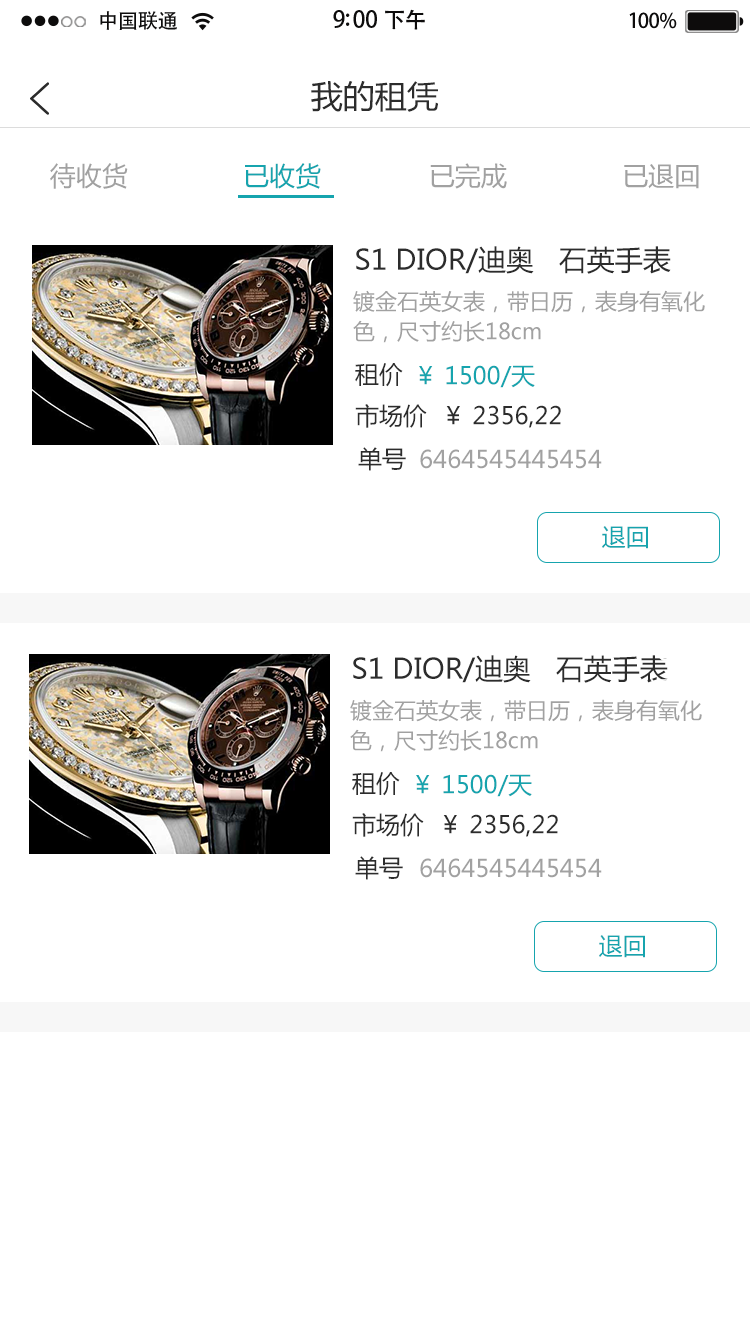
<style>
.page{position:relative;width:750px;height:1334px;background:#ffffff}
.page>*{position:absolute;margin:0}
.t1{font:20.4px "AdobeHeitiStd-Regular";letter-spacing:-0.02em;color:#000000}
.t2{font:23px "AdobeHeitiStd-Regular";letter-spacing:-0.02em;color:#000000}
.t3{font:22px "AdobeHeitiStd-Regular";letter-spacing:-0.02em;color:#000000}
.t4{font:20.4px "AdobeHeitiStd-Regular";letter-spacing:-0.02em;color:#010101}
.t5{font:32px "MicrosoftYaHei";color:#2c2c2c}
.t6{font:26px "MicrosoftYaHei";color:#a1a1a1}
.t7{font:26px "MicrosoftYaHei";color:#2c2c2c}
.t8{font:26px "MicrosoftYaHei";color:#16a4ae}
.t9{font:28px "MicrosoftYaHei";color:#2c2c2c}
.t10{font:22px/15px "MicrosoftYaHei";color:#a1a1a1}
.t11{font:24px "MicrosoftYaHei";color:#2c2c2c}
.t12{font:24px "MicrosoftYaHei";color:#16a4ae}
.t13{font:24px "MicrosoftYaHei";color:#a1a1a1}
</style>
<div class="page">
<p class="t1" style="left:100px;top:11px;width:77px;height:19px">中国联通</p>
<p class="t2" style="left:333px;top:9px;width:92px;height:21px">9:00 <span class="t3">下午</span></p>
<p class="t4" style="left:629px;top:12px;width:48px;height:17px">100%</p>
<p class="t5" style="left:311px;top:81px;width:127px;height:31px">我的租凭</p>
<p class="t6" style="left:50px;top:163px;width:649px;height:26px"><span class="t7"> </span>待收货               <span class="t8">已收货  </span>            已完成               已退回</p>
<p class="t9" style="left:356px;top:246px;width:315px;height:28px">S1 DIOR/迪奥   石英手表</p>
<p class="t10" style="left:353px;top:290px;width:352px;height:53px">镀金石英女表，带日历，表身有氧化<br><br>色，尺寸约长18cm</p>
<p class="t11" style="left:355px;top:363px;width:48px;height:24px">租价</p>
<p class="t12" style="left:419px;top:365px;width:116px;height:23px">￥ 1500/天</p>
<p class="t11" style="left:355px;top:404px;width:206px;height:24px">市场价  ￥ 2356,22</p>
<p class="t11" style="left:358px;top:447px;width:48px;height:24px">单号</p>
<p class="t13" style="left:420px;top:449px;width:182px;height:20px">6464545445454</p>
<p class="t12" style="left:602px;top:526px;width:46px;height:23px">退回</p>
<p class="t9" style="left:353px;top:655px;width:315px;height:28px">S1 DIOR/迪奥   石英手表</p>
<p class="t10" style="left:350px;top:699px;width:352px;height:53px">镀金石英女表，带日历，表身有氧化<br><br>色，尺寸约长18cm</p>
<p class="t11" style="left:352px;top:772px;width:48px;height:24px">租价</p>
<p class="t12" style="left:416px;top:774px;width:116px;height:23px">￥ 1500/天</p>
<p class="t11" style="left:352px;top:813px;width:206px;height:24px">市场价  ￥ 2356,22</p>
<p class="t11" style="left:355px;top:856px;width:48px;height:24px">单号</p>
<p class="t13" style="left:420px;top:858px;width:182px;height:20px">6464545445454</p>
<p class="t12" style="left:599px;top:935px;width:46px;height:23px">退回</p>
</div>
